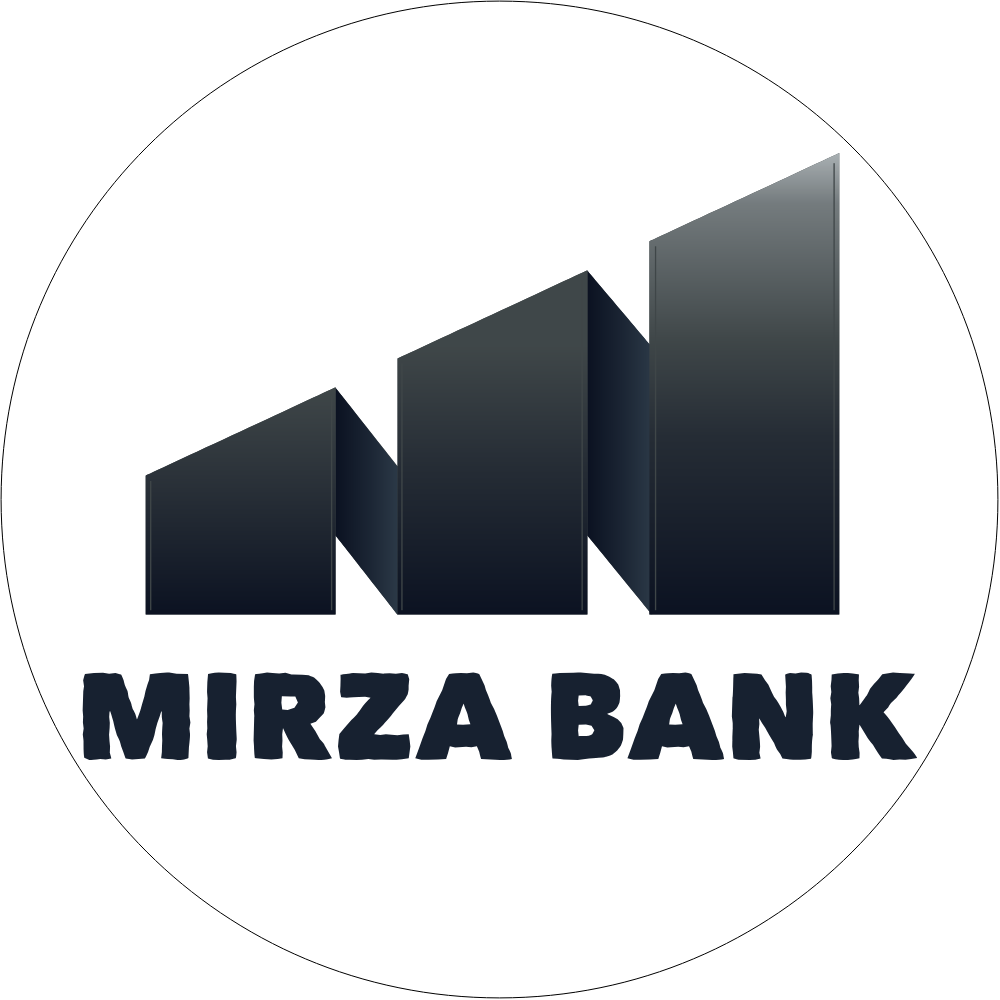
<style>
.page{position:relative;width:1000px;height:1000px;background:#ffffff}
.page>*{position:absolute;margin:0}
.t1{font:123.4px "Matiz";color:#172130}
</style>
<div class="page">
<p class="t1" style="left:82px;top:672px;width:835px;height:88px">MIRZA BANK</p>
</div>
